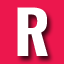
<style>
.page{position:relative;width:64px;height:64px;background:#ec174d}
.page>*{position:absolute;margin:0}
.t1{font:60px "Oswald-Bold";color:#ffffff;text-transform:uppercase}
</style>
<div class="page">
<p class="t1" style="left:17px;top:7px;width:31px;height:49px">R</p>
</div>
